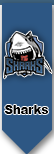
<style>
.page{position:relative;width:54px;height:154px;background:#2d5784}
.page>*{position:absolute;margin:0}
.t1{font:11.7px "Arial-Black";letter-spacing:-0.01em;color:#000000}
</style>
<div class="page">
<p class="t1" style="left:4px;top:105px;width:45px;height:9px">Sharks</p>
</div>
